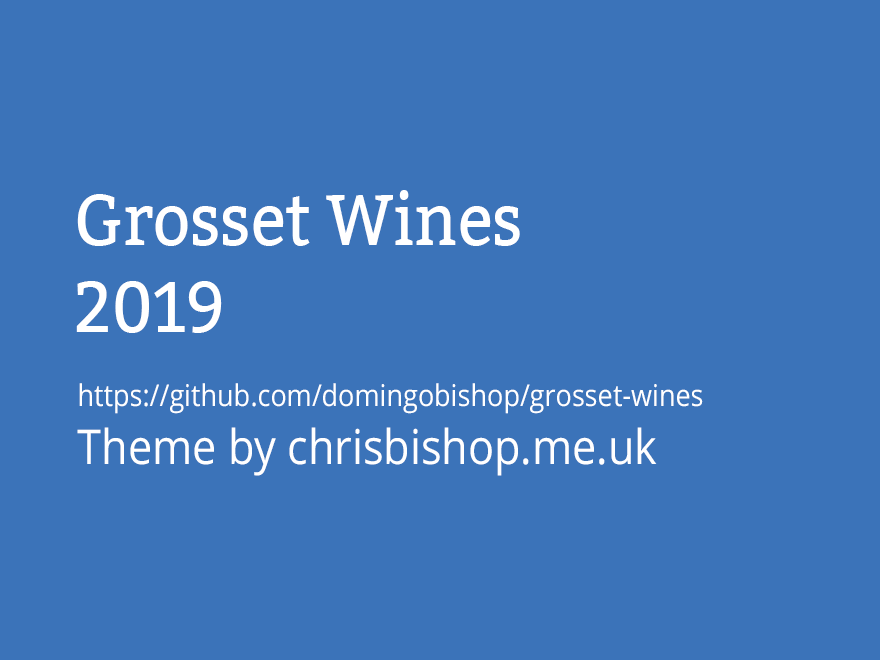
<style>
.page{position:relative;width:880px;height:660px;background:#3b73b9}
.page>*{position:absolute;margin:0}
.t1{font:72px "Bitter-Regular";color:#ffffff;scale:0.9 1}
.t2{font:30px "OpenSans";color:#ffffff;scale:0.9 1}
.t3{font:48px "OpenSans";color:#ffffff;scale:0.9 1}
</style>
<div class="page">
<p class="t1" style="left:76px;top:190px;width:444px;height:143px">Grosset Wines <br>2019</p>
<p class="t2" style="left:77px;top:383px;width:626px;height:93px">https://github.com/domingobishop/grosset-wines<br><span class="t3">Theme by chrisbishop.me.uk</span></p>
</div>
